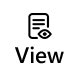
<style>
.page{position:relative;width:76px;height:77px;background:#ffffff}
.page>*{position:absolute;margin:0}
.t1{font:22.5px "YuGothicUI-Semibold";color:#000000}
</style>
<div class="page">
<p class="t1" style="left:15px;top:46px;width:49px;height:18px">View</p>
</div>
